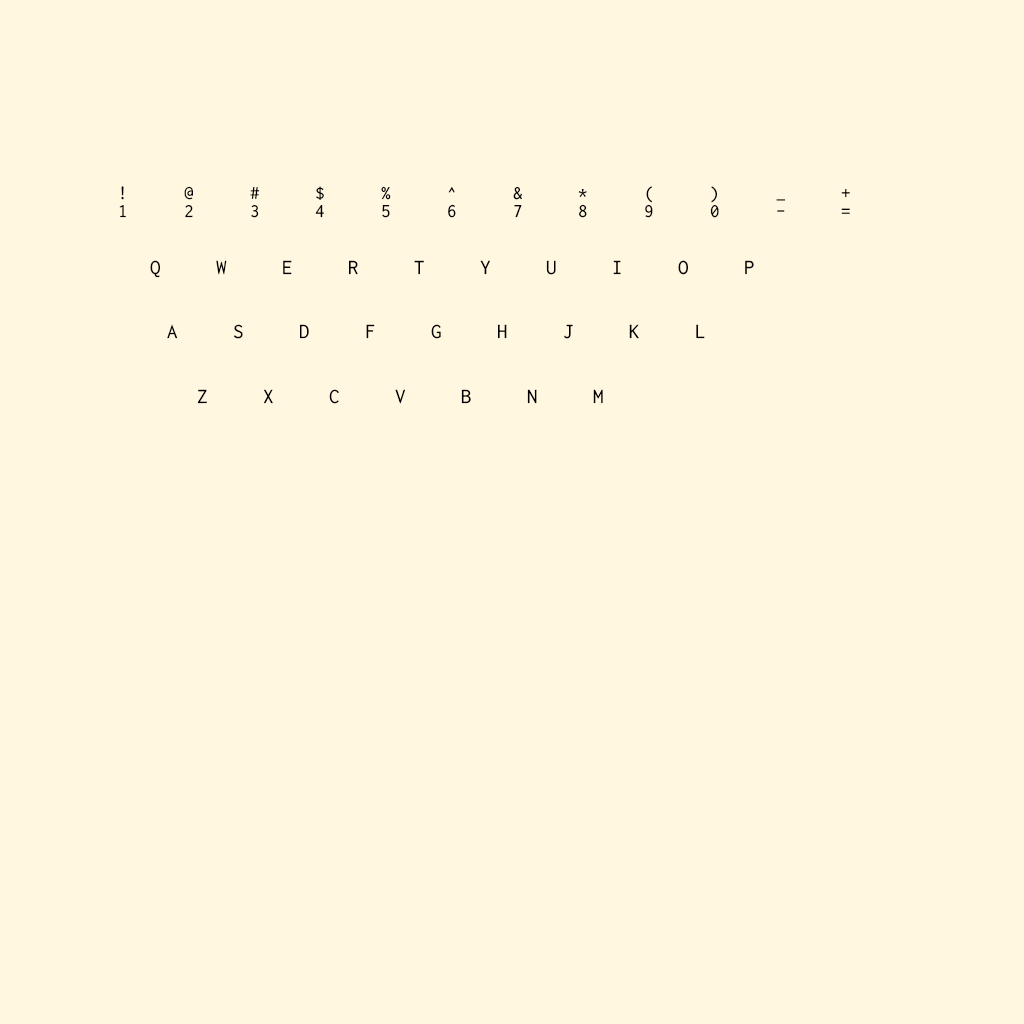
<style>
.page{position:relative;width:1024px;height:1024px;background:#fff7df}
.page>*{position:absolute;margin:0}
.t1{font:19px "Inconsolata";letter-spacing:2.96em;color:#000000}
.t2{font:21px "Inconsolata";letter-spacing:2.64em;color:#000000}
</style>
<div class="page">
<p class="t1" style="left:121px;top:186px;width:729px;height:17px">!@#$%^&amp;*()_+</p>
<p class="t1" style="left:119px;top:204px;width:731px;height:14px">1234567890-=</p>
<p class="t2" style="left:150px;top:260px;width:604px;height:18px">QWERTYUIOP</p>
<p class="t2" style="left:167px;top:324px;width:538px;height:15px">ASDFGHJKL</p>
<p class="t2" style="left:197px;top:389px;width:406px;height:15px">ZXCVBNM</p>
</div>
